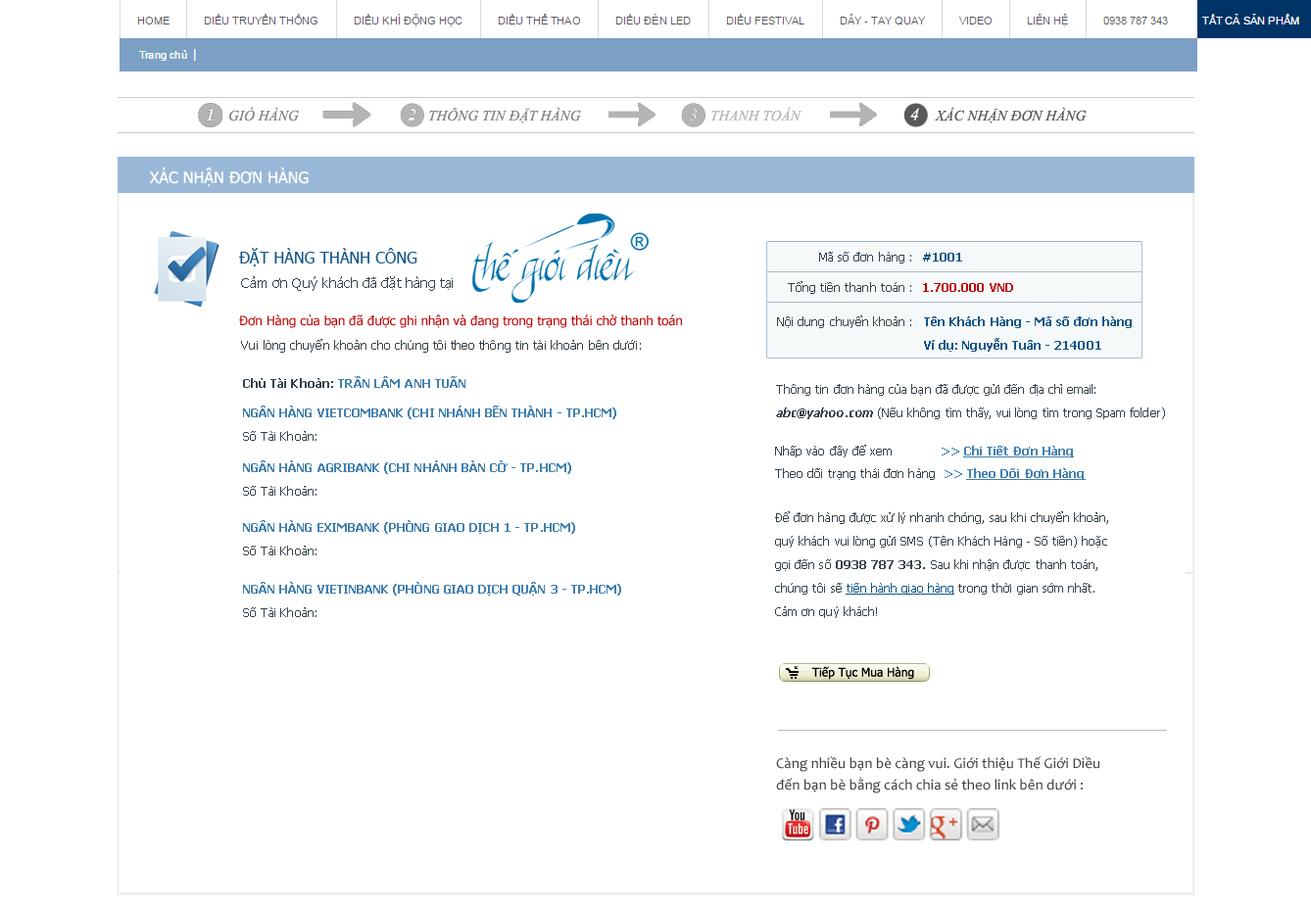
<style>
.page{position:relative;width:1311px;height:909px;background:#ffffff}
.page>*{position:absolute;margin:0}
.t1{font:14.7px "TimesNewRomanPS-ItalicMT";letter-spacing:0.005em;color:#808285}
.t2{font:14.7px "TimesNewRomanPS-ItalicMT";letter-spacing:0.005em;color:#b4b4b4}
.t3{font:17.6px "TimesNewRomanPS-ItalicMT";letter-spacing:0.005em;color:#ffffff}
.t4{font:14.7px "TimesNewRomanPS-ItalicMT";letter-spacing:0.005em;color:#58595b}
.t5{font:15.7px "Tahoma";letter-spacing:0.005em;color:#ffffff}
.t6{font:15.7px "Tahoma";letter-spacing:0.005em;color:#125687}
.t7{font:11.8px "Tahoma";letter-spacing:0.005em;color:#36424a}
.t8{font:11.8px "Tahoma-Bold";letter-spacing:0.005em;color:#125687}
.t9{font:13.7px "Tahoma";letter-spacing:0.005em;color:#36424a}
.t10{font:11.8px "Tahoma-Bold";letter-spacing:0.005em;color:#bf0000}
.t11{font:12.7px "Tahoma";letter-spacing:0.005em;color:#bf0000}
.t12{font:11.8px/23.5px "Tahoma-Bold";letter-spacing:0.005em;color:#125687}
.t13{font:12.7px "Tahoma";letter-spacing:0.005em;color:#36424a}
.t14{font:11.8px "Tahoma-Bold";letter-spacing:0.005em;color:#4280af}
.t15{font:11.8px "Tahoma-Bold";letter-spacing:0.005em;color:#36424a}
.t16{font:11.8px/23.5px "Tahoma";letter-spacing:0.005em;color:#36424a}
.t17{font:11.8px/23.5px "Tahoma-Bold";letter-spacing:0.005em;color:#36424a;font-style:italic}
.t18{font:11.8px "Tahoma-Bold";letter-spacing:0.005em;color:#4280af;text-decoration:underline}
.t19{font:11.8px/23.5px "Tahoma-Bold";letter-spacing:0.005em;color:#36424a}
.t20{font:11.8px/23.5px "Tahoma";letter-spacing:0.005em;color:#125687;text-decoration:underline}
.t21{font:14.7px/21.6px "Candara";letter-spacing:0.005em;color:#414042}
</style>
<div class="page">
<p class="t1" style="left:229px;top:107px;width:70px;height:15px">GIỎ HÀNG</p>
<p class="t1" style="left:429px;top:107px;width:152px;height:16px">THÔNG TIN ĐẶT HÀNG</p>
<p class="t2" style="left:711px;top:107px;width:92px;height:15px">THANH TOÁN</p>
<p class="t3" style="left:910px;top:108px;width:9px;height:13px">4</p>
<p class="t4" style="left:934px;top:107px;width:153px;height:16px">XÁC NHẬN ĐƠN HÀNG</p>
<p class="t5" style="left:150px;top:167px;width:159px;height:19px">XÁC NHẬN ĐƠN HÀNG</p>
<p class="t6" style="left:239px;top:248px;width:178px;height:19px">ĐẶT HÀNG THÀNH CÔNG</p>
<p class="t7" style="left:819px;top:252px;width:92px;height:12px">Mã số đơn hàng :</p>
<p class="t8" style="left:923px;top:253px;width:39px;height:9px">#1001</p>
<p class="t9" style="left:241px;top:276px;width:212px;height:15px">Cảm ơn Quý khách đã đặt hàng tại</p>
<p class="t7" style="left:788px;top:281px;width:123px;height:13px">Tổng tiền thanh toán :</p>
<p class="t10" style="left:923px;top:283px;width:90px;height:9px">1.700.000 VND</p>
<p class="t11" style="left:239px;top:315px;width:443px;height:13px">Đơn Hàng của bạn đã được ghi nhận và đang trong trạng thái chờ thanh toán</p>
<p class="t7" style="left:777px;top:316px;width:134px;height:12px">Nội dung chuyển khoản :</p>
<p class="t12" style="left:924px;top:317px;width:208px;height:35px">Tên Khách Hàng - Mã số đơn hàng<br>Ví dụ: Nguyễn Tuân - 214001</p>
<p class="t13" style="left:241px;top:339px;width:400px;height:14px">Vui lòng chuyển khoản cho chúng tôi theo thông tin tài khoản bên dưới:</p>
<p class="t14" style="left:243px;top:376px;width:222px;height:12px"><span class="t15">Chủ Tài Khoản: </span>TRẦN LÂM ANH TUẤN</p>
<p class="t16" style="left:776px;top:384px;width:389px;height:35px">Thông tin đơn hàng của bạn đã được gửi đến địa chỉ email: <br><span class="t17">abc@yahoo.com </span>(Nếu không tìm thấy, vui lòng tìm trong Spam folder)</p>
<p class="t14" style="left:243px;top:406px;width:373px;height:13px">NGÂN HÀNG VIETCOMBANK (CHI NHÁNH BẾN THÀNH - TP.HCM)</p>
<p class="t7" style="left:243px;top:431px;width:74px;height:10px">Số Tài Khoản:</p>
<p class="t7" style="left:775px;top:445px;width:299px;height:13px">Nhấp vào đây để xem<span class="t14">            &gt;&gt; </span><span class="t18">Chi Tiết Đơn Hàng</span></p>
<p class="t14" style="left:243px;top:461px;width:328px;height:13px">NGÂN HÀNG AGRIBANK (CHI NHÁNH BÀN CỜ - TP.HCM)</p>
<p class="t7" style="left:775px;top:468px;width:311px;height:12px">Theo dõi trạng thái đơn hàng  <span class="t14">&gt;&gt; </span><span class="t18">Theo Dõi Đơn Hàng</span></p>
<p class="t7" style="left:243px;top:486px;width:74px;height:10px">Số Tài Khoản:</p>
<p class="t14" style="left:243px;top:520px;width:332px;height:14px">NGÂN HÀNG EXIMBANK (PHÒNG GIAO DỊCH 1 - TP.HCM)</p>
<p class="t16" style="left:775px;top:512px;width:333px;height:106px">Để đơn hàng được xử lý nhanh chóng, sau khi chuyển khoản,<br>quý khách vui lòng gửi SMS (Tên Khách Hàng - Số tiền) hoặc<br>gọi đến số <span class="t19">0938 787 343. </span>Sau khi nhận được thanh toán,<br>chúng tôi sẽ <span class="t20">tiến hành giao hàng</span> trong thời gian sớm nhất.<br>Cảm ơn quý khách!</p>
<p class="t7" style="left:243px;top:546px;width:74px;height:10px">Số Tài Khoản:</p>
<p class="t14" style="left:243px;top:582px;width:378px;height:14px">NGÂN HÀNG VIETINBANK (PHÒNG GIAO DỊCH QUẬN 3 - TP.HCM)</p>
<p class="t7" style="left:243px;top:608px;width:74px;height:9px">Số Tài Khoản:</p>
<p class="t21" style="left:776px;top:757px;width:325px;height:37px">Càng nhiều bạn bè càng vui. Giới thiệu Thế Giới Diều<br>đến bạn bè bằng cách chia sẻ theo link bên dưới :</p>
</div>
